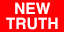
<style>
.page{position:relative;width:64px;height:32px;background:#ff0004}
.page>*{position:absolute;margin:0}
.t1{font:15.5px/15px "Helvetica-Bold";color:#ffffff}
</style>
<div class="page">
<p class="t1" style="left:6px;top:2px;width:52px;height:28px;text-align:center">NEW<br>TRUTH</p>
</div>
